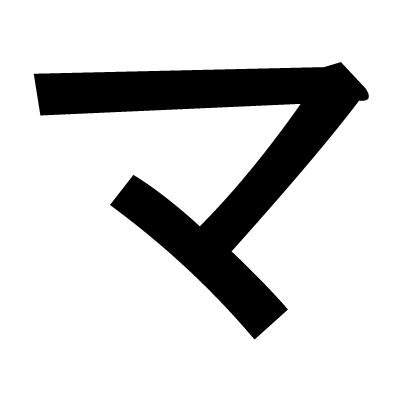
<style>
.page{position:relative;width:400px;height:400px;background:#ffffff}
.page>*{position:absolute;margin:0}
.t1{font:424.8px "MS-PGothic";color:#000000}
</style>
<div class="page">
<p class="t1" style="left:33px;top:62px;width:336px;height:278px">マ</p>
</div>
